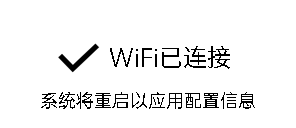
<style>
.page{position:relative;width:296px;height:128px;background:#ffffff}
.page>*{position:absolute;margin:0}
.t1{font:24px "OPPOSans-R";color:#000000}
.t2{font:18px "OPPOSans-R";color:#000000}
</style>
<div class="page">
<p class="t1" style="left:110px;top:46px;width:120px;height:23px">WiFi已连接</p>
<p class="t2" style="left:41px;top:92px;width:214px;height:17px">系统将重启以应用配置信息</p>
</div>
